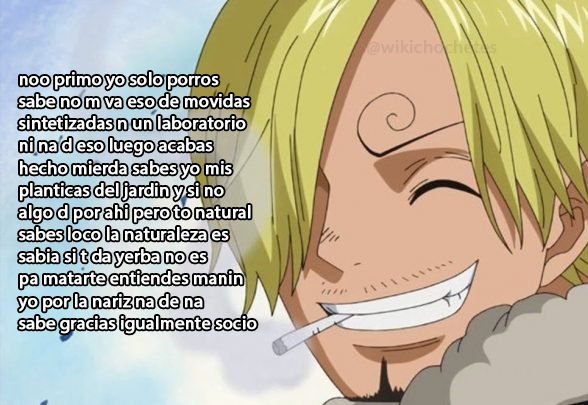
<style>
.page{position:relative;width:588px;height:405px}
.page>*{position:absolute;margin:0}
.t1{font:18px "MyriadPro-Regular";color:#ffffff;font-weight:bold}
</style>
<div class="page">
<p class="t1" style="left:18px;top:72px;width:239px;height:262px">noo primo yo solo porros<br>sabe no m va eso de movidas<br>sintetizadas n un laboratorio<br>ni na d eso luego acabas<br>hecho mierda sabes yo mis<br>planticas del jardin y si no<br>algo d por ahi pero to natural<br>sabes loco la naturaleza es<br>sabia si t da yerba no es<br>pa matarte entiendes manin<br>yo por la nariz na de na<br>sabe gracias igualmente socio</p>
</div>
